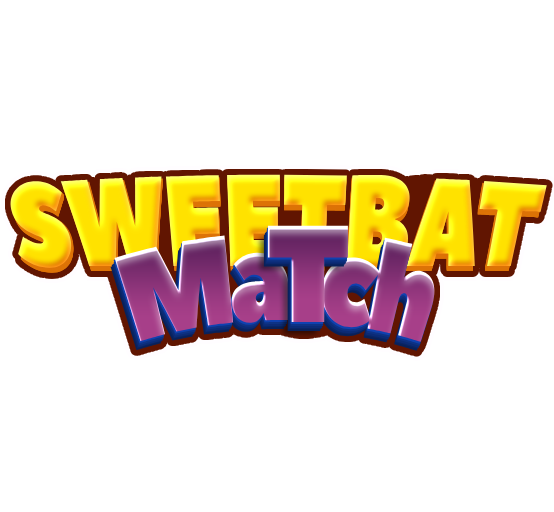
<style>
.page{position:relative;width:554px;height:512px;background:#ffffff}
.page>*{position:absolute;margin:0}
.t1{font:115px "PeaceSans";letter-spacing:-0.025em;scale:0.83 1}
.t2{font:113.9px "PeaceSans";letter-spacing:-0.025em;scale:0.83 1}
.t3{font:124.6px "PeaceSans";letter-spacing:-0.075em;scale:0.77 1}
</style>
<div class="page">
<p class="t1" style="left:10px;top:174px;width:537px;height:94px">SWEETBAT</p>
<p class="t2" style="left:12px;top:180px;width:533px;height:93px">SWEETBAT</p>
<p class="t2" style="left:13px;top:180px;width:532px;height:93px">SWEETBAT</p>
<p class="t2" style="left:13px;top:179px;width:532px;height:93px">SWEETBAT</p>
<p class="t2" style="left:13px;top:179px;width:532px;height:93px">SWEETBAT</p>
<p class="t2" style="left:13px;top:178px;width:532px;height:93px">SWEETBAT</p>
<p class="t2" style="left:13px;top:177px;width:532px;height:93px">SWEETBAT</p>
<p class="t2" style="left:13px;top:176px;width:532px;height:93px">SWEETBAT</p>
<p class="t3" style="left:114px;top:235px;width:321px;height:107px">Ma     ch</p>
</div>
